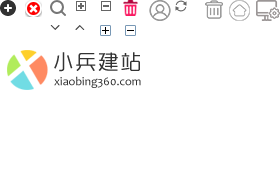
<style>
.page{position:relative;width:280px;height:180px;background:#ffffff}
.page>*{position:absolute;margin:0}
.t1{font:20px "MFYueHei_Noncommercial-Light";letter-spacing:0.098em;color:#333333;font-weight:bold}
.t2{font:12px "Candara";color:#333333}
</style>
<div class="page">
<p class="t1" style="left:54px;top:52px;width:86px;height:20px">小兵建站</p>
<p class="t2" style="left:54px;top:76px;width:87px;height:12px">xiaobing360.com</p>
</div>
